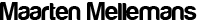
<style>
.page{position:relative;width:200px;height:20px;background:#ffffff}
.page>*{position:absolute;margin:0}
.t1{font:26px "Harabara";color:#000000}
</style>
<div class="page">
<p class="t1" style="left:0px;top:2px;width:197px;height:18px">Maarten Mellemans</p>
</div>
